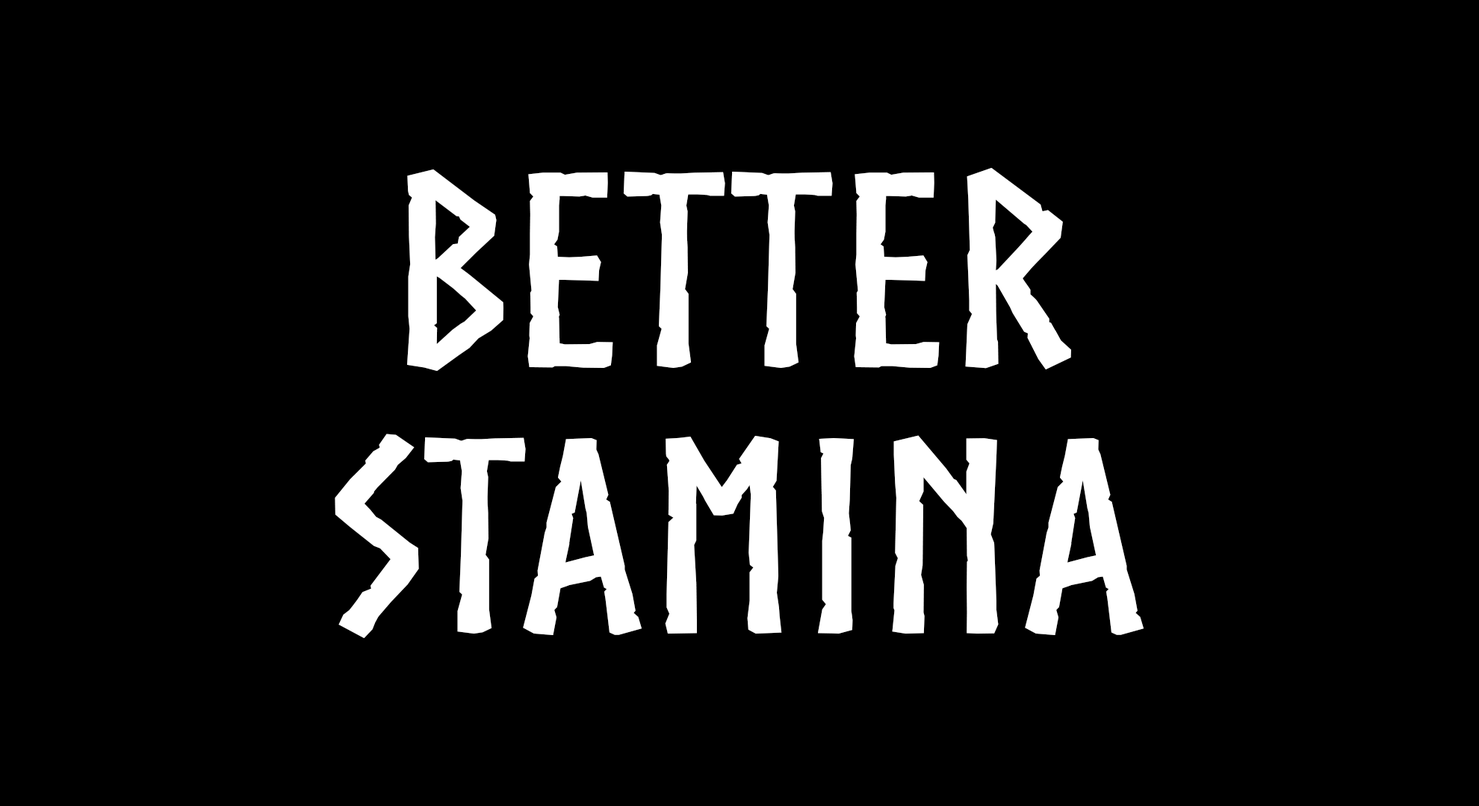
<style>
.page{position:relative;width:1479px;height:806px;background:#000000}
.page>*{position:absolute;margin:0}
.t1{font:265.5px/265.5px "Norse-Bold";color:#ffffff;scale:1.16 1}
</style>
<div class="page">
<p class="t1" style="left:335px;top:168px;width:808px;height:470px;text-align:center">Better<br>Stamina</p>
</div>
